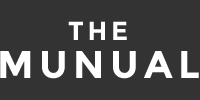
<style>
.page{position:relative;width:200px;height:100px;background:#333333}
.page>*{position:absolute;margin:0}
.t1{font:26.2px "Montserrat-Bold";letter-spacing:0.15em;color:#ffffff;text-transform:uppercase}
.t2{font:38.6px "Montserrat-Bold";letter-spacing:0.15em;color:#ffffff;text-transform:uppercase}
</style>
<div class="page">
<p class="t1" style="left:68px;top:21px;width:59px;height:19px">The</p>
<p class="t2" style="left:0px;top:51px;width:199px;height:28px">Munual</p>
</div>
